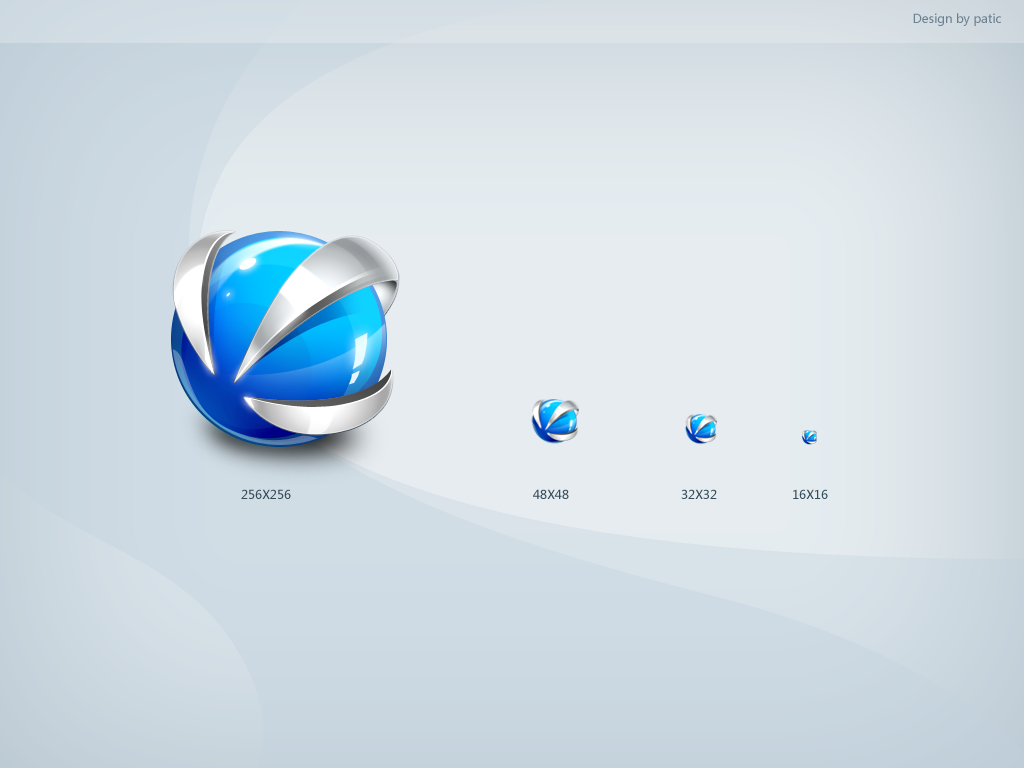
<style>
.page{position:relative;width:1024px;height:768px}
.page>*{position:absolute;margin:0}
.t1{font:12px "MicrosoftYaHei";color:#6b8191}
.t2{font:12px "MicrosoftYaHei";color:#364d5b}
</style>
<div class="page">
<p class="t1" style="left:913px;top:13px;width:88px;height:13px">Design by patic</p>
<p class="t2" style="left:241px;top:489px;width:50px;height:10px">256X256</p>
<p class="t2" style="left:533px;top:489px;width:36px;height:10px">48X48</p>
<p class="t2" style="left:681px;top:489px;width:36px;height:10px">32X32</p>
<p class="t2" style="left:793px;top:489px;width:35px;height:10px">16X16</p>
</div>
